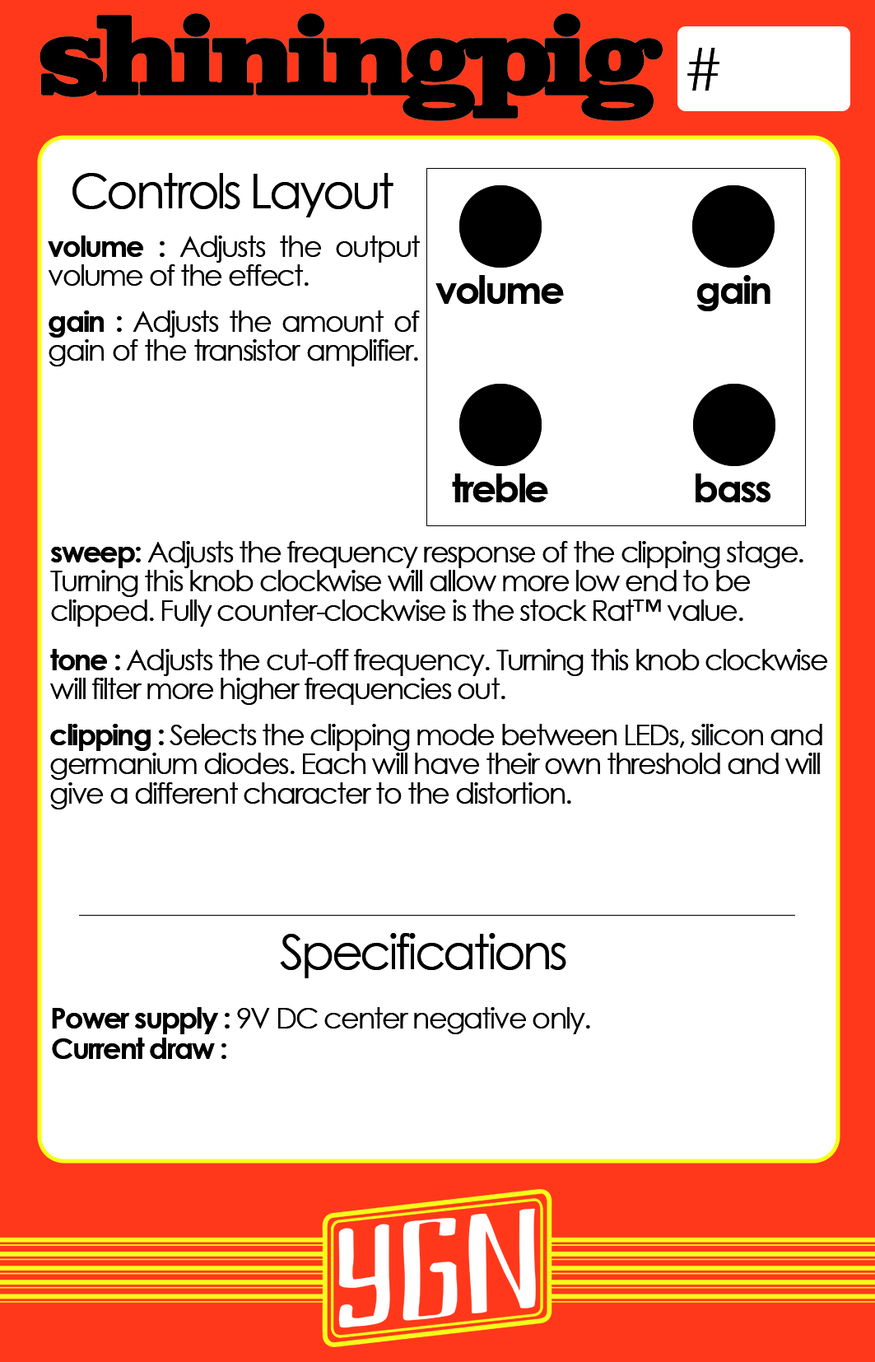
<style>
.page{position:relative;width:875px;height:1362px;background:#ffffff}
.page>*{position:absolute;margin:0}
.t1{font:107px "Clarendon-ExtraBold";letter-spacing:-0.08em;color:#000000;font-weight:bold}
.t2{font:58.4px "CenturyGothic";color:#000000}
.t3{font:48.6px "CenturyGothic";letter-spacing:-0.06em;color:#000000}
.t4{font:29.2px/29.2px "CenturyGothic";letter-spacing:-0.06em;color:#000000}
.t5{font:29.2px/29.2px "CenturyGothic-Bold";letter-spacing:-0.06em;color:#000000}
.t6{font:38.9px "CenturyGothic-Bold";letter-spacing:-0.06em;color:#000000}
.t7{font:29.2px "CenturyGothic";letter-spacing:-0.06em;color:#000000}
.t8{font:29.2px "CenturyGothic-Bold";letter-spacing:-0.06em;color:#000000}
</style>
<div class="page">
<p class="t1" style="left:40px;top:13px;width:623px;height:108px">shiningpig</p>
<p class="t2" style="left:688px;top:48px;width:32px;height:43px">#</p>
<p class="t3" style="left:72px;top:173px;width:322px;height:44px">Controls Layout</p>
<p class="t4" style="left:48px;top:236px;width:372px;height:50px;text-align:justify"><span class="t5">volume : </span>Adjusts the output<br>volume of the effect.</p>
<p class="t6" style="left:436px;top:275px;width:128px;height:29px">volume</p>
<p class="t6" style="left:698px;top:275px;width:73px;height:36px">gain</p>
<p class="t4" style="left:49px;top:310px;width:371px;height:56px;text-align:justify"><span class="t5">gain : </span>Adjusts the amount of gain of the transistor amplifier.</p>
<p class="t6" style="left:452px;top:474px;width:96px;height:28px">treble</p>
<p class="t6" style="left:696px;top:474px;width:75px;height:28px">bass</p>
<p class="t4" style="left:50px;top:541px;width:754px;height:86px"><span class="t5">sweep: </span>Adjusts the frequency response of the clipping stage. <br>Turning this knob clockwise will allow more low end to be <br>clipped. Fully counter-clockwise is the stock Rat™ value.</p>
<p class="t4" style="left:50px;top:649px;width:778px;height:56px"><span class="t5">tone : </span>Adjusts the cut-off frequency. Turning this knob clockwise<br>will filter more higher frequencies out.</p>
<p class="t4" style="left:50px;top:724px;width:773px;height:86px"><span class="t5">clipping :</span> Selects the clipping mode between LEDs, silicon and<br>germanium diodes. Each will have their own threshold and will<br>give a different character to the distortion.</p>
<p class="t3" style="left:280px;top:933px;width:287px;height:45px">Specifications</p>
<p class="t7" style="left:52px;top:1007px;width:538px;height:27px"><span class="t8">Power supply : </span>9V DC center negative only.</p>
<p class="t8" style="left:52px;top:1038px;width:174px;height:21px">Current draw :</p>
</div>
